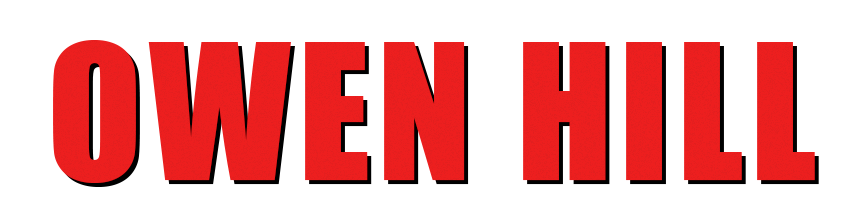
<style>
.page{position:relative;width:863px;height:223px;background:#ffffff}
.page>*{position:absolute;margin:0}
.t1{font:174px "Impact";letter-spacing:0.04em;color:#ed1f1f}
</style>
<div class="page">
<p class="t1" style="left:53px;top:40px;width:762px;height:143px">OWEN HILL</p>
</div>
